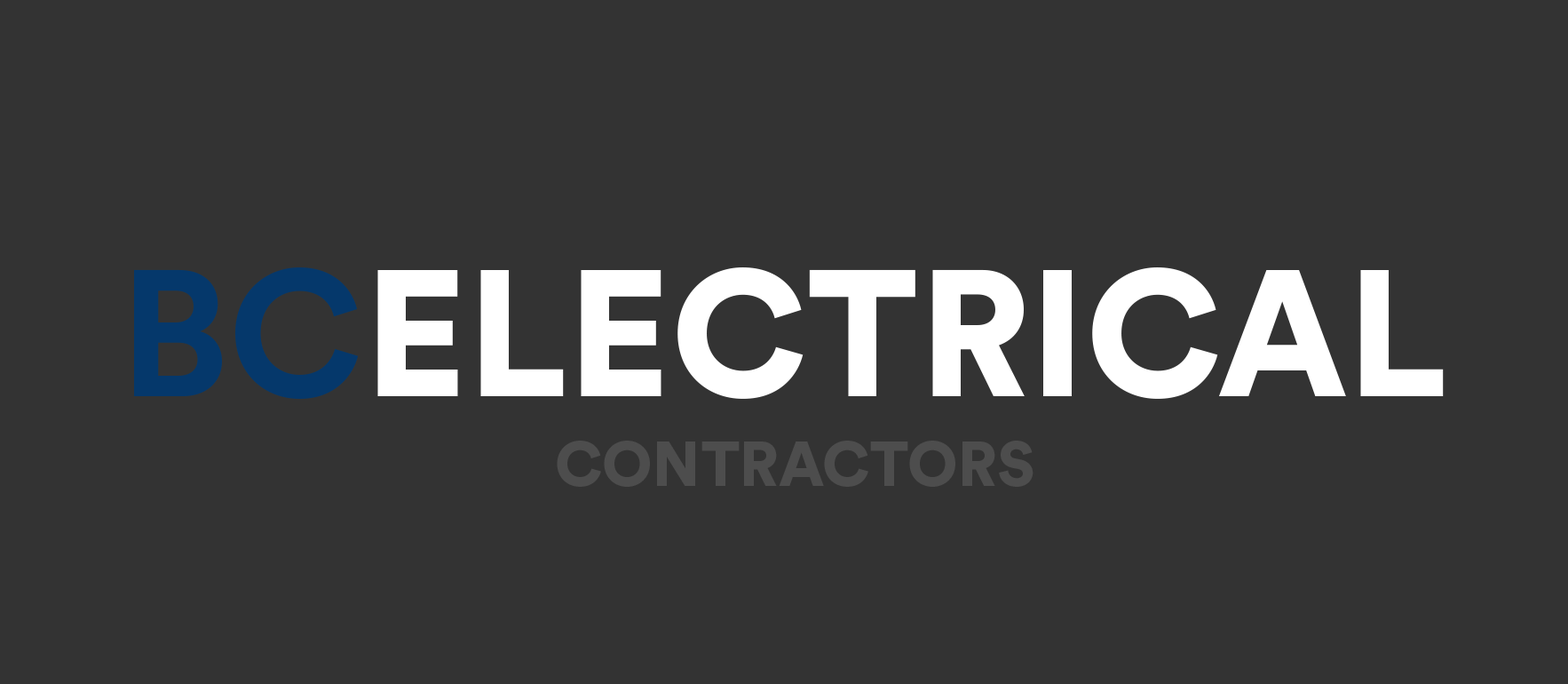
<style>
.page{position:relative;width:1568px;height:684px;background:#333333}
.page>*{position:absolute;margin:0}
.t1{font:177.6px "CircularStd-Black";color:#ffffff}
.t2{font:177.6px "CircularStd-Bold";color:#05386b}
.t3{font:62.2px "CircularStd-Black";color:#4d4d4d}
</style>
<div class="page">
<p class="t1" style="left:134px;top:267px;width:1310px;height:132px"><span class="t2">BC</span>ELECTRICAL</p>
<p class="t3" style="left:557px;top:440px;width:476px;height:47px">CONTRACTORS</p>
</div>
